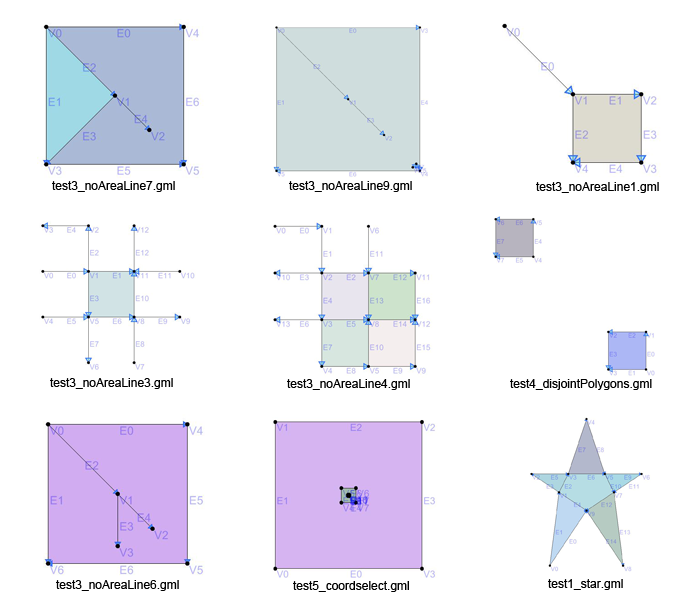
<style>
.page{position:relative;width:700px;height:600px;background:#ffffff}
.page>*{position:absolute;margin:0}
.t1{font:12px "ArialMT";color:#000000}
</style>
<div class="page">
<p class="t1" style="left:52px;top:181px;width:123px;height:11px">test3_noAreaLine7.gml</p>
<p class="t1" style="left:289px;top:181px;width:123px;height:11px">test3_noAreaLine9.gml</p>
<p class="t1" style="left:536px;top:182px;width:123px;height:11px">test3_noAreaLine1.gml</p>
<p class="t1" style="left:50px;top:378px;width:123px;height:11px">test3_noAreaLine3.gml</p>
<p class="t1" style="left:287px;top:379px;width:123px;height:11px">test3_noAreaLine4.gml</p>
<p class="t1" style="left:510px;top:379px;width:142px;height:11px">test4_disjointPolygons.gml</p>
<p class="t1" style="left:56px;top:580px;width:123px;height:11px">test3_noAreaLine6.gml</p>
<p class="t1" style="left:293px;top:581px;width:116px;height:11px">test5_coordselect.gml</p>
<p class="t1" style="left:548px;top:579px;width:75px;height:11px">test1_star.gml</p>
</div>
